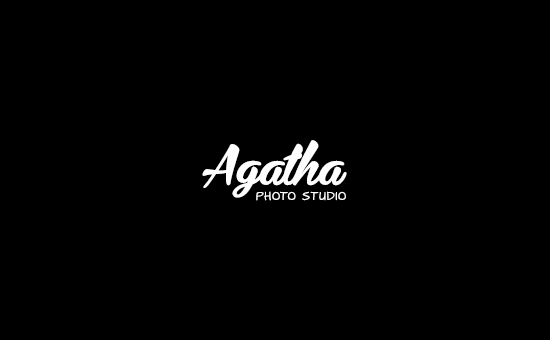
<style>
.page{position:relative;width:550px;height:340px;background:#000000}
.page>*{position:absolute;margin:0}
.t1{font:48px "Bira-PERSONALUSEONLY";color:#fffefe}
.t2{font:9.6px "ArchitectsDaughter";letter-spacing:0.1em;color:#fffefe;text-transform:uppercase}
</style>
<div class="page">
<p class="t1" style="left:202px;top:140px;width:145px;height:58px">Agatha</p>
<p class="t2" style="left:256px;top:191px;width:90px;height:10px">Photo Studio</p>
</div>
